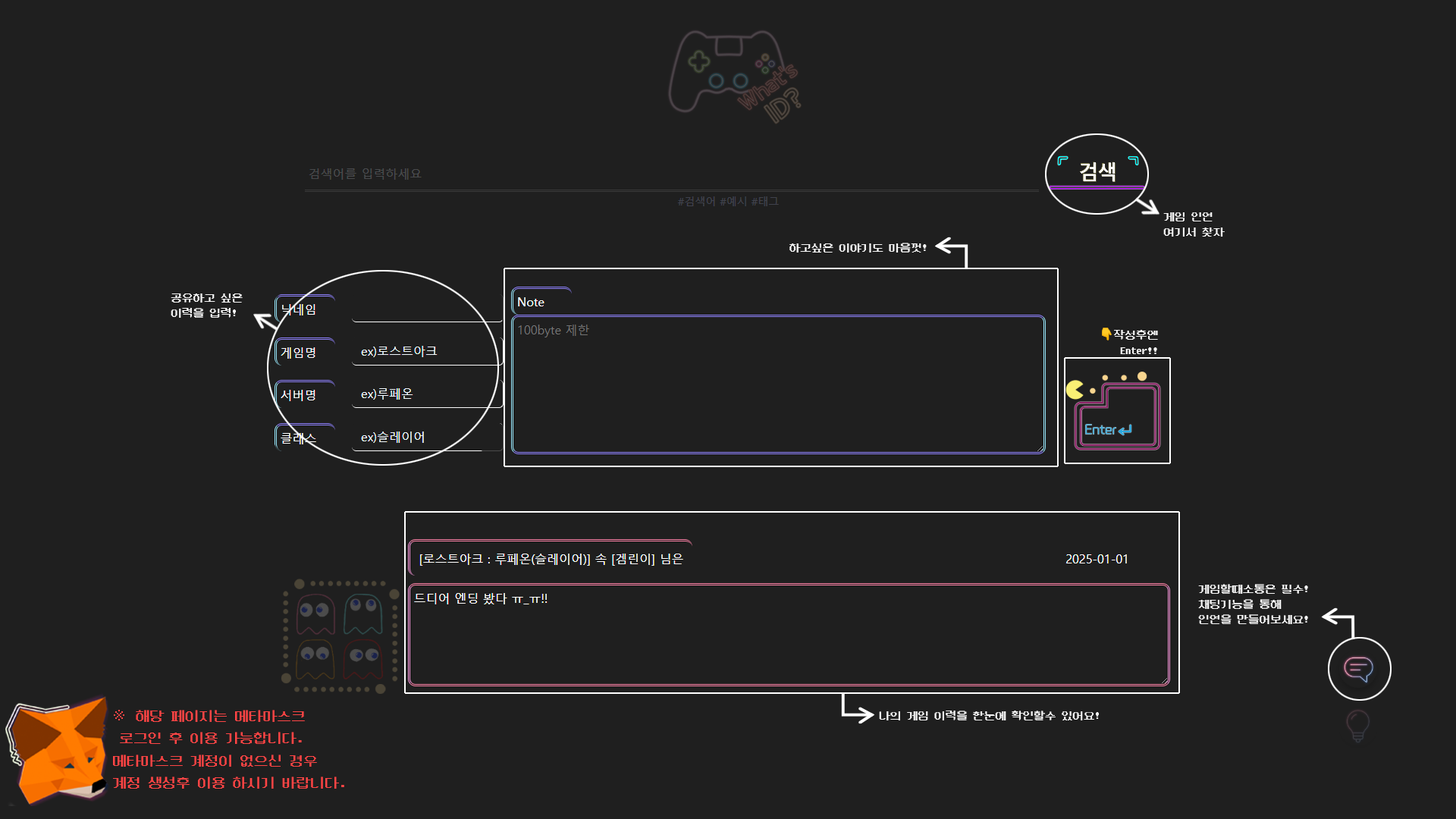
<style>
.page{position:relative;width:1456px;height:819px;background:#1f1f1f}
.page>*{position:absolute;margin:0}
.t1{font:11.4px/15.4px "DungGeunMo";letter-spacing:-0.025em;color:#f6f6f6}
.t2{font:11.4px "DungGeunMo";letter-spacing:-0.025em;color:#f6f6f6}
.t3{font:11.4px/15.9px "DungGeunMo";letter-spacing:-0.025em;color:#f6f6f6}
.t4{font:11.4px/15.9px "NotoColorEmoji-SVG";letter-spacing:-0.025em;color:#f6f6f6}
.t5{font:14.6px/22.3px "DungGeunMo";letter-spacing:-0.025em;color:#ff4545}
.t6{font:24.3px/22.3px "DungGeunMo";letter-spacing:-0.025em;color:#ff4545}
</style>
<div class="page">
<p class="t1" style="left:1163px;top:212px;width:62px;height:25px">게임 인연 <br>여기서 찾자</p>
<p class="t2" style="left:789px;top:243px;width:138px;height:10px">하고싶은 이야기도 마음껏!</p>
<p class="t1" style="left:171px;top:293px;width:72px;height:25px">공유하고 싶은 <br>이력을 입력!</p>
<p class="t3" style="left:1102px;top:328px;width:56px;height:26px;text-align:right"><span class="t4">👇</span>작성후엔<br> Enter!!</p>
<p class="t1" style="left:1198px;top:584px;width:110px;height:40px">게임할때소통은 필수! <br>채팅기능을 통해 <br>인연을 만들어보세요!</p>
<p class="t5" style="left:113px;top:710px;width:231px;height:79px"><span class="t6">※ </span>해당 페이지는 메타마스크<br> 로그인 후 이용 가능합니다.<br>메타마스크 계정이 없으신 경우 <br>계정 생성후 이용 하시기 바랍니다.</p>
<p class="t2" style="left:879px;top:711px;width:220px;height:9px">나의 게임 이력을 한눈에 확인할수 있어요!</p>
</div>
